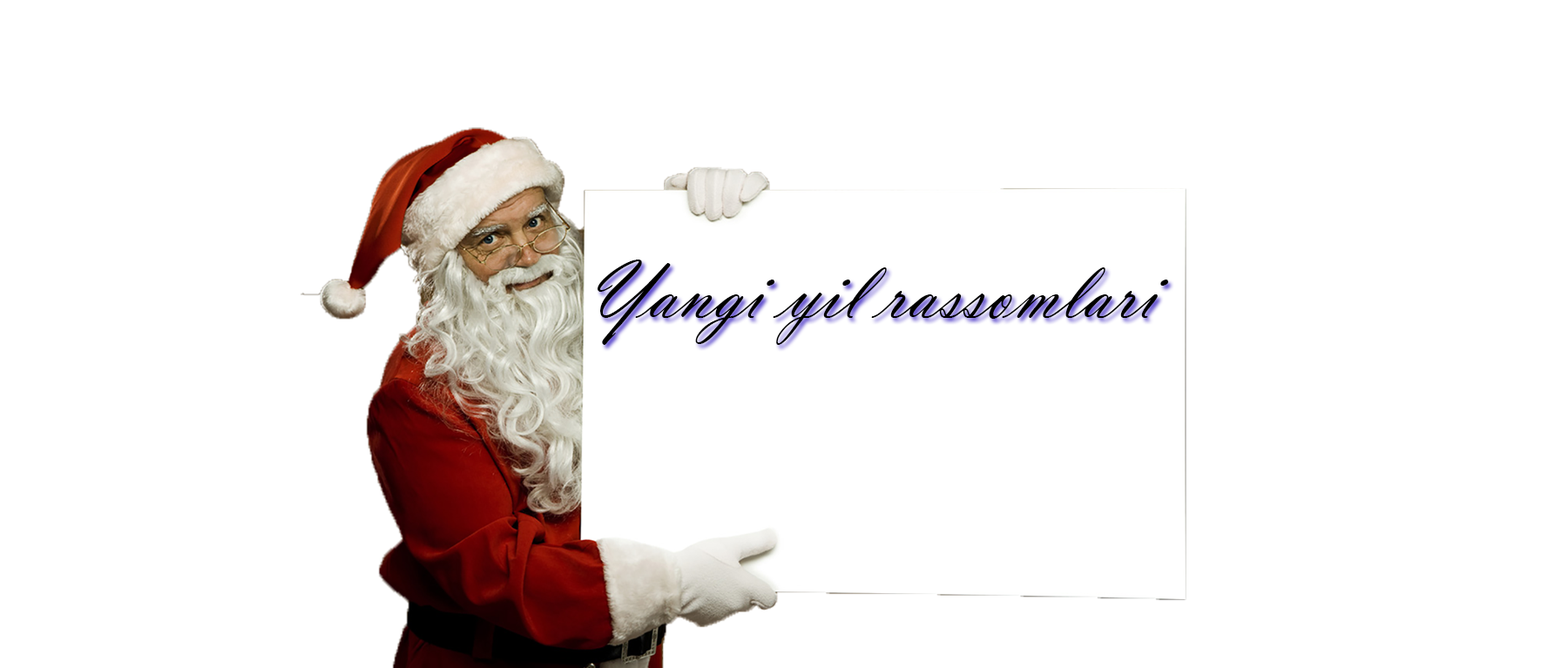
<style>
.page{position:relative;width:1568px;height:668px;background:#ffffff}
.page>*{position:absolute;margin:0}
.t1{font:20.8px "VladimirScript";color:#000000;scale:0.95 1}
</style>
<div class="page">
<p class="t1" style="left:598px;top:260px;width:570px;height:85px">Yangi yil rassomlari</p>
</div>
